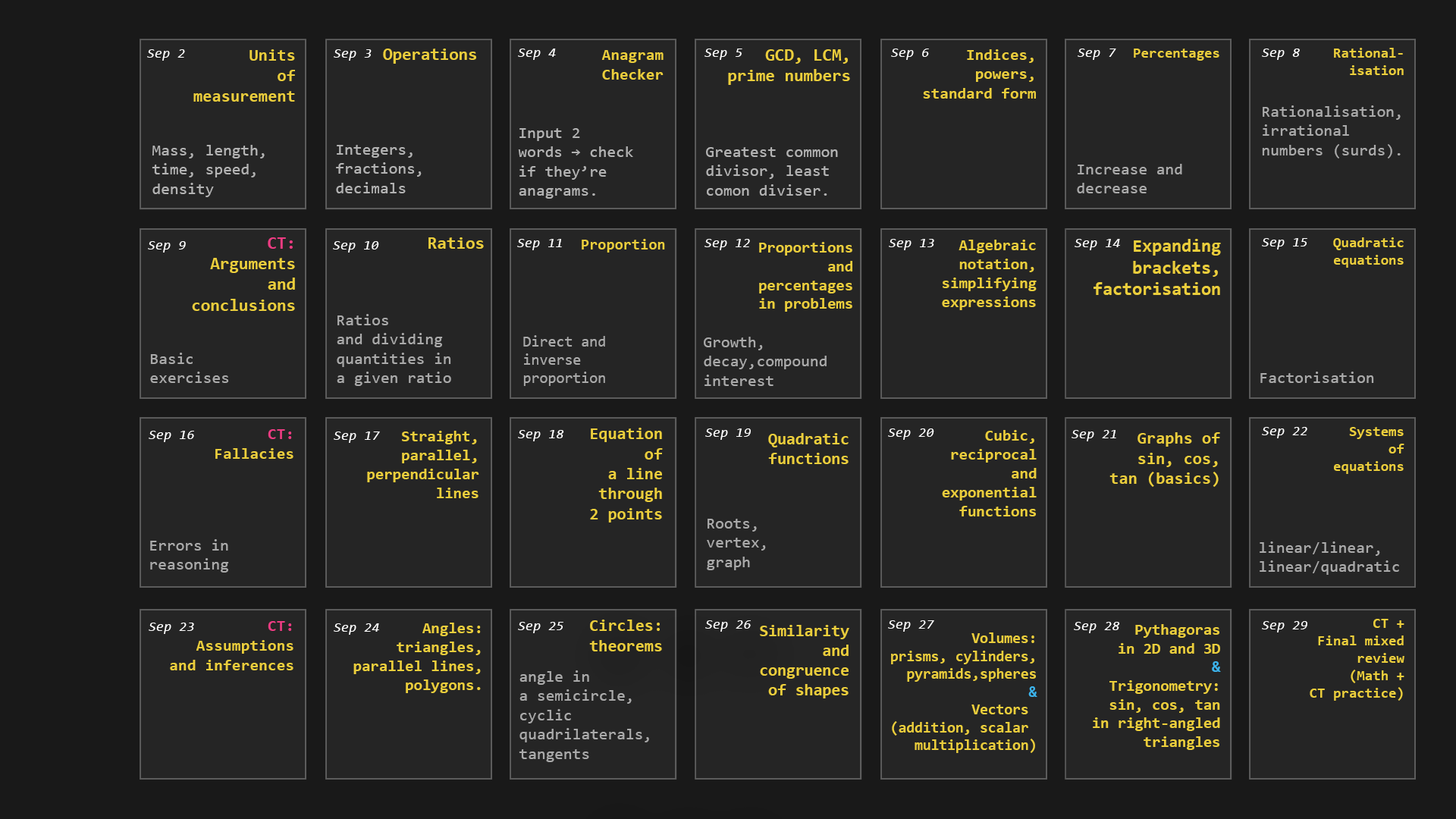
<style>
.page{position:relative;width:1456px;height:819px;background:#252525}
.page>*{position:absolute;margin:0}
.t1{font:13.9px "Consolas-Italic";color:#ffffff}
.t2{font:16.9px "Consolas-Bold";color:#ebce3c}
.t3{font:17.2px "Consolas-Bold";color:#ebce3c}
.t4{font:16px "Consolas-Bold";color:#ebce3c}
.t5{font:17.3px "Consolas-Bold";color:#ebce3c}
.t6{font:15.9px "Consolas-Bold";color:#ebce3c}
.t7{font:14.4px "Consolas-Bold";color:#ebce3c}
.t8{font:16.1px "Consolas";color:#aaaaaa}
.t9{font:16.1px "Consolas";color:#b3b3b3}
.t10{font:17.3px "Consolas-Bold";color:#eb3c82}
.t11{font:15.4px "Consolas-Bold";color:#ebce3c}
.t12{font:15.7px "Consolas-Bold";color:#ebce3c}
.t13{font:17.9px "Consolas-Bold";color:#ebce3c}
.t14{font:15.1px "Consolas";color:#aaaaaa}
.t15{font:16.3px "Consolas-Bold";color:#ebce3c}
.t16{font:16.3px "Consolas-Bold";color:#eb3c82}
.t17{font:15.8px "Consolas-Bold";color:#ebce3c}
.t18{font:16.7px "Consolas-Bold";color:#ebce3c}
.t19{font:16.4px "Consolas-Bold";color:#ebce3c}
.t20{font:16.8px "Consolas-Bold";color:#ebce3c}
.t21{font:15.6px "Consolas-Bold";color:#ebce3c}
.t22{font:15.6px "Consolas-Bold";color:#3cb3eb}
.t23{font:14.8px "Consolas-Bold";color:#ebce3c}
.t24{font:14.8px "Consolas-Bold";color:#3cb3eb}
</style>
<div class="page">
<p class="t1" style="left:147px;top:49px;width:38px;height:12px">Sep 2</p>
<p class="t2" style="left:193px;top:49px;width:102px;height:53px;text-align:right">Units<br>of<br>measurement</p>
<p class="t1" style="left:334px;top:49px;width:38px;height:12px">Sep 3</p>
<p class="t3" style="left:383px;top:49px;width:93px;height:15px">Operations</p>
<p class="t1" style="left:518px;top:49px;width:38px;height:11px">Sep 4</p>
<p class="t4" style="left:601px;top:50px;width:63px;height:30px;text-align:right">Anagram<br>Checker</p>
<p class="t1" style="left:704px;top:49px;width:38px;height:11px">Sep 5</p>
<p class="t5" style="left:728px;top:49px;width:122px;height:36px;text-align:right">GCD, LCM,<br>prime numbers</p>
<p class="t1" style="left:891px;top:49px;width:38px;height:11px">Sep 6</p>
<p class="t6" style="left:923px;top:49px;width:113px;height:50px;text-align:right">Indices,<br>powers,<br>standard form</p>
<p class="t1" style="left:1078px;top:49px;width:38px;height:11px">Sep 7</p>
<p class="t7" style="left:1134px;top:49px;width:85px;height:12px">Percentages</p>
<p class="t1" style="left:1262px;top:49px;width:38px;height:11px">Sep 8</p>
<p class="t7" style="left:1334px;top:48px;width:70px;height:27px;text-align:right">Rational-<br>isation</p>
<p class="t8" style="left:1262px;top:105px;width:139px;height:53px">Rationalisation, <br>irrational <br>numbers (surds).</p>
<p class="t9" style="left:518px;top:128px;width:115px;height:71px">Input 2 <br>words → check <br>if they’re <br>anagrams.</p>
<p class="t9" style="left:152px;top:145px;width:113px;height:52px">Mass, length, <br>time, speed, <br>density</p>
<p class="t9" style="left:336px;top:145px;width:86px;height:48px">Integers, <br>fractions, <br>decimals</p>
<p class="t9" style="left:706px;top:147px;width:132px;height:49px">Greatest common<br>divisor, least<br>comon diviser.</p>
<p class="t8" style="left:1077px;top:164px;width:105px;height:29px">Increase and<br>decrease</p>
<p class="t1" style="left:148px;top:241px;width:38px;height:12px">Sep 9</p>
<p class="t5" style="left:192px;top:237px;width:103px;height:74px;text-align:right"><span class="t10">CT:<br></span>Arguments<br>and<br> conclusions</p>
<p class="t1" style="left:333px;top:241px;width:46px;height:12px">Sep 10</p>
<p class="t5" style="left:428px;top:237px;width:56px;height:12px">Ratios</p>
<p class="t1" style="left:517px;top:239px;width:45px;height:11px">Sep 11</p>
<p class="t11" style="left:582px;top:239px;width:83px;height:14px">Proportion</p>
<p class="t1" style="left:704px;top:239px;width:46px;height:11px">Sep 12</p>
<p class="t12" style="left:759px;top:242px;width:93px;height:70px;text-align:right">Proportions<br> and<br> percentages<br> in problems</p>
<p class="t1" style="left:889px;top:239px;width:45px;height:11px">Sep 13</p>
<p class="t12" style="left:942px;top:240px;width:95px;height:70px;text-align:right">Algebraic<br> notation,<br> simplifying<br> expressions</p>
<p class="t1" style="left:1075px;top:239px;width:45px;height:11px">Sep 14</p>
<p class="t13" style="left:1094px;top:239px;width:127px;height:56px;text-align:right">Expanding<br> brackets,<br> factorisation</p>
<p class="t1" style="left:1262px;top:238px;width:45px;height:11px">Sep 15</p>
<p class="t7" style="left:1333px;top:237px;width:71px;height:31px;text-align:right">Quadratic<br> equations</p>
<p class="t8" style="left:337px;top:314px;width:114px;height:72px">Ratios<br>and dividing <br>quantities in <br>a given ratio</p>
<p class="t14" style="left:523px;top:335px;width:82px;height:51px">Direct and <br>inverse <br>proportion</p>
<p class="t8" style="left:704px;top:337px;width:123px;height:49px">Growth, <br>decay,compound <br>interest</p>
<p class="t8" style="left:150px;top:353px;width:79px;height:30px">Basic <br>exercises</p>
<p class="t8" style="left:1260px;top:372px;width:114px;height:11px">Factorisation</p>
<p class="t1" style="left:149px;top:431px;width:45px;height:11px">Sep 16</p>
<p class="t15" style="left:215px;top:429px;width:78px;height:30px;text-align:right"><span class="t16">CT:<br></span>Fallacies</p>
<p class="t1" style="left:334px;top:431px;width:46px;height:12px">Sep 17</p>
<p class="t17" style="left:367px;top:431px;width:112px;height:67px;text-align:right">Straight,<br>parallel,<br>perpendicular<br>lines</p>
<p class="t1" style="left:518px;top:430px;width:46px;height:11px">Sep 18</p>
<p class="t18" style="left:590px;top:428px;width:73px;height:94px;text-align:right">Equation<br> of<br> a line<br> through<br> 2 points</p>
<p class="t1" style="left:705px;top:428px;width:46px;height:12px">Sep 19</p>
<p class="t19" style="left:768px;top:433px;width:81px;height:31px;text-align:right">Quadratic<br> functions</p>
<p class="t1" style="left:888px;top:428px;width:46px;height:12px">Sep 20</p>
<p class="t12" style="left:942px;top:430px;width:95px;height:86px;text-align:right">Cubic,<br> reciprocal<br> and<br> exponential<br> functions</p>
<p class="t1" style="left:1072px;top:430px;width:44px;height:11px">Sep 21</p>
<p class="t20" style="left:1109px;top:432px;width:111px;height:55px;text-align:right">Graphs of<br> sin, cos,<br> tan (basics)</p>
<p class="t1" style="left:1262px;top:427px;width:45px;height:11px">Sep 22</p>
<p class="t7" style="left:1334px;top:427px;width:70px;height:47px;text-align:right">Systems<br> of<br> equations</p>
<p class="t8" style="left:707px;top:519px;width:59px;height:51px">Roots, <br>vertex, <br>graph</p>
<p class="t8" style="left:150px;top:539px;width:79px;height:34px">Errors in <br>reasoning</p>
<p class="t8" style="left:1260px;top:541px;width:139px;height:34px">linear/linear,<br>linear/quadratic</p>
<p class="t1" style="left:149px;top:623px;width:45px;height:11px">Sep 23</p>
<p class="t15" style="left:170px;top:621px;width:123px;height:49px;text-align:right"><span class="t16">CT:<br></span> Assumptions<br> and inferences</p>
<p class="t1" style="left:334px;top:623px;width:45px;height:12px">Sep 24</p>
<p class="t17" style="left:353px;top:623px;width:128px;height:70px;text-align:right">Angles:<br> triangles,<br> parallel lines,<br> polygons.</p>
<p class="t1" style="left:518px;top:622px;width:45px;height:11px">Sep 25</p>
<p class="t18" style="left:589px;top:620px;width:73px;height:31px;text-align:right">Circles:<br> theorems</p>
<p class="t1" style="left:705px;top:620px;width:46px;height:12px">Sep 26</p>
<p class="t19" style="left:760px;top:625px;width:89px;height:73px;text-align:right">Similarity<br> and<br> congruence<br> of shapes</p>
<p class="t1" style="left:888px;top:620px;width:46px;height:12px">Sep 27</p>
<p class="t1" style="left:1074px;top:622px;width:46px;height:11px">Sep 28</p>
<p class="t21" style="left:1093px;top:624px;width:128px;height:126px;text-align:right">Pythagoras<br> in 2D and 3D<br><span class="t22">&amp;<br></span>Trigonometry:<br> sin, cos, tan<br> in right-angled<br> triangles</p>
<p class="t1" style="left:1262px;top:621px;width:45px;height:11px">Sep 29</p>
<p class="t7" style="left:1310px;top:619px;width:94px;height:82px;text-align:right">CT +<br> Final mixed<br> review<br> (Math +<br> CT practice)</p>
<p class="t23" style="left:891px;top:632px;width:146px;height:121px;text-align:right">Volumes:<br> prisms, cylinders,<br>pyramids,spheres<br><span class="t24">&amp;<br></span>Vectors <br>(addition, scalar <br>multiplication)</p>
<p class="t8" style="left:519px;top:670px;width:130px;height:92px">angle in <br>a semicircle, <br>cyclic <br>quadrilaterals, <br>tangents</p>
</div>
